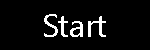
<style>
.page{position:relative;width:150px;height:50px;background:#000000}
.page>*{position:absolute;margin:0}
.t1{font:32px "SegoeUI";color:#ffffff}
</style>
<div class="page">
<p class="t1" style="left:44px;top:14px;width:62px;height:23px">Start</p>
</div>
